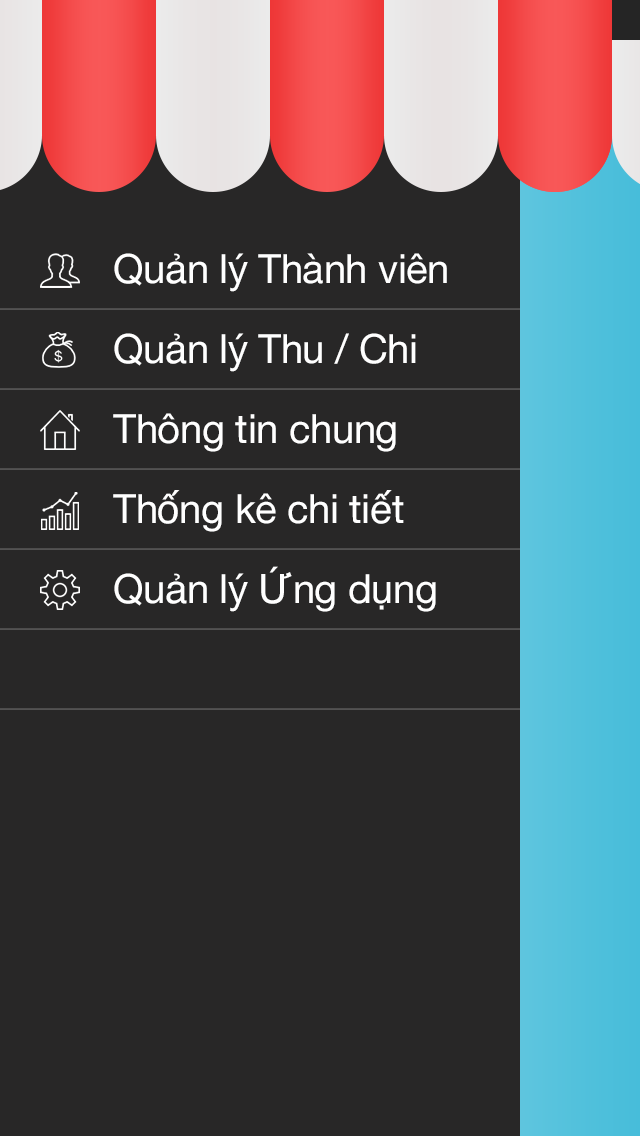
<style>
.page{position:relative;width:640px;height:1136px;background:#282727}
.page>*{position:absolute;margin:0}
.t1{font:40.4px "HelveticaNeue";letter-spacing:-0.01em;color:#ffffff}
</style>
<div class="page">
<p class="t1" style="left:114px;top:253px;width:333px;height:39px">Quản lý Thành viên</p>
<p class="t1" style="left:114px;top:333px;width:302px;height:39px">Quản lý Thu / Chi</p>
<p class="t1" style="left:113px;top:413px;width:283px;height:39px">Thông tin chung</p>
<p class="t1" style="left:113px;top:490px;width:291px;height:42px">Thống kê chi tiết</p>
<p class="t1" style="left:114px;top:566px;width:322px;height:46px">Quản lý Ứng dụng</p>
</div>
